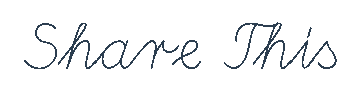
<style>
.page{position:relative;width:350px;height:100px;background:#ffffff}
.page>*{position:absolute;margin:0}
.t1{font:61.5px "DeutscheNormalschrift";color:#2c3e50}
</style>
<div class="page">
<p class="t1" style="left:24px;top:22px;width:313px;height:47px">Share This</p>
</div>
